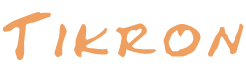
<style>
.page{position:relative;width:246px;height:72px;background:#ffffff}
.page>*{position:absolute;margin:0}
.t1{font:48px "CrackedJohnnie";letter-spacing:0.2em;color:#efa061;font-variant:small-caps}
</style>
<div class="page">
<p class="t1" style="left:3px;top:12px;width:241px;height:48px">Tikron</p>
</div>
